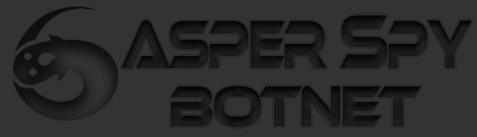
<style>
.page{position:relative;width:477px;height:137px;background:#333333}
.page>*{position:absolute;margin:0}
.t1{font:70.1px "EthnocentricRg-Regular";letter-spacing:-0.06em;color:#171717;scale:0.62 1}
.t2{font:78.4px "EthnocentricRg-Regular";letter-spacing:-0.06em;color:#171717;scale:0.67 1}
.t3{font:59.4px "EthnocentricRg-Regular";letter-spacing:-0.06em;color:#171717;scale:0.8 1}
</style>
<div class="page">
<p class="t1" style="left:121px;top:15px;width:351px;height:53px">asper <span class="t2">s</span>py</p>
<p class="t3" style="left:171px;top:86px;width:250px;height:41px">botnet</p>
</div>
